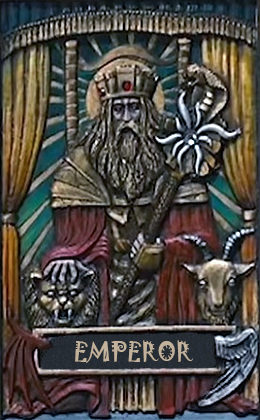
<style>
.page{position:relative;width:260px;height:420px}
.page>*{position:absolute;margin:0}
.t1{font:24px "Jokerman-Regular";color:#c2b19b}
</style>
<div class="page">
<p class="t1" style="left:75px;top:340px;width:118px;height:23px">EMPEROR</p>
</div>
